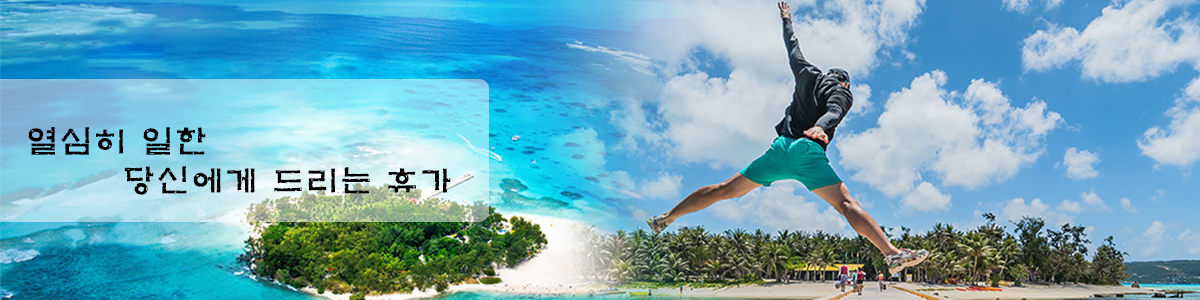
<style>
.page{position:relative;width:1200px;height:300px}
.page>*{position:absolute;margin:0}
.t1{font:32.1px "H2mkpB";letter-spacing:0.06em;color:#000000}
</style>
<div class="page">
<p class="t1" style="left:28px;top:127px;width:423px;height:68px;text-align:center">열심히 일한 <br>당신에게 드리는 휴가</p>
</div>
